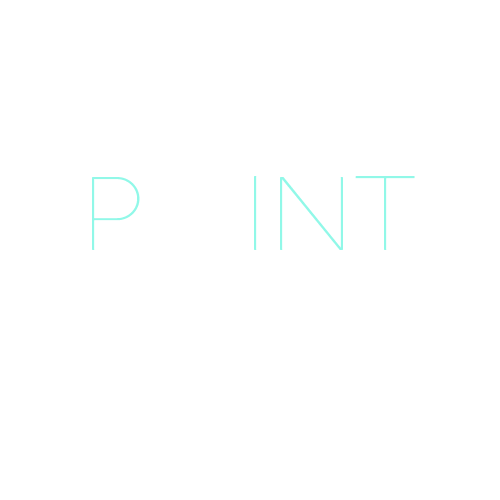
<style>
.page{position:relative;width:500px;height:500px;background:#ffffff}
.page>*{position:absolute;margin:0}
.t1{font:98px "SlimJoe";color:#91f8e8}
</style>
<div class="page">
<p class="t1" style="left:92px;top:176px;width:323px;height:74px">p  int</p>
</div>
